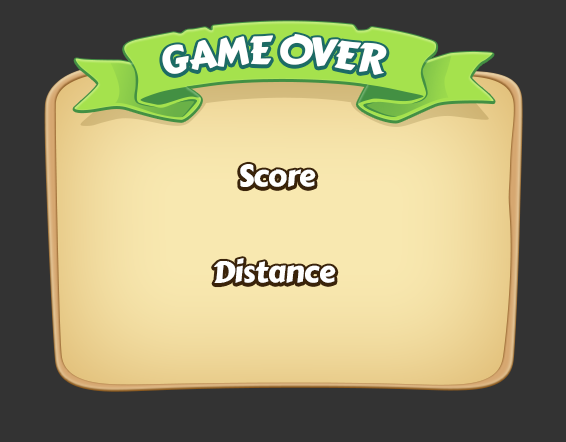
<style>
.page{position:relative;width:566px;height:442px;background:#333333}
.page>*{position:absolute;margin:0}
.t1{font:38px "CarterOne";letter-spacing:-0.02em;color:#ffffff}
.t2{font:30px/48px "CarterOne";letter-spacing:-0.02em;color:#ffffff}
</style>
<div class="page">
<p class="t1" style="left:162px;top:34px;width:225px;height:41px">GAME OVER</p>
<p class="t2" style="left:214px;top:164px;width:122px;height:119px;text-align:center">Score<br> <br>Distance</p>
</div>
